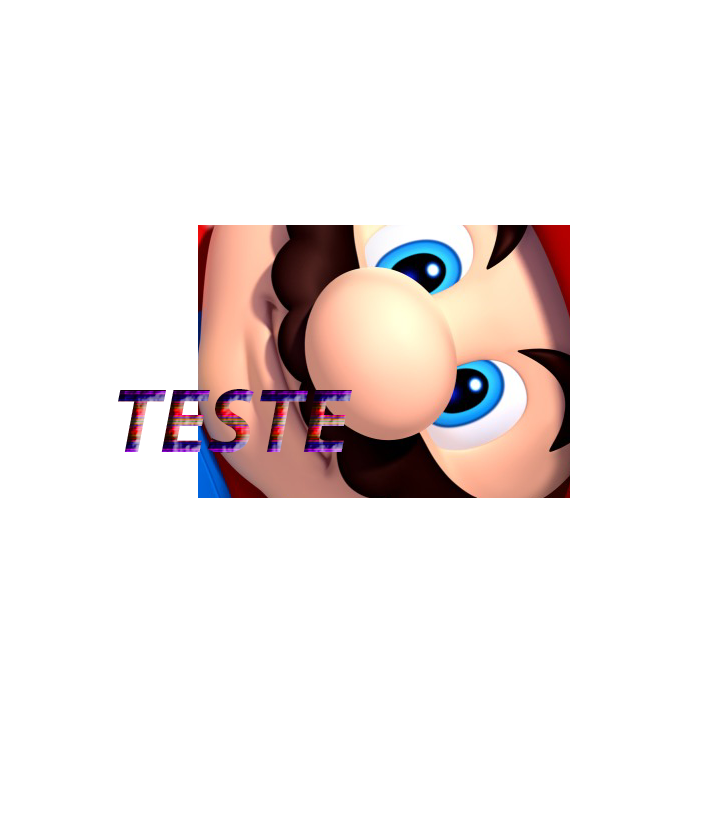
<style>
.page{position:relative;width:727px;height:838px;background:#ffffff}
.page>*{position:absolute;margin:0}
.t1{font:91.4px "MyriadPro-BoldIt"}
</style>
<div class="page">
<p class="t1" style="left:118px;top:389px;width:234px;height:64px">TESTE</p>
</div>
